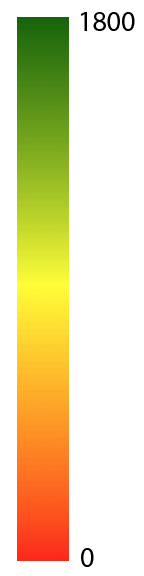
<style>
.page{position:relative;width:144px;height:576px;background:#ffffff}
.page>*{position:absolute;margin:0}
.t1{font:28px "MyriadPro-Regular";color:#000000}
</style>
<div class="page">
<p class="t1" style="left:80px;top:12px;width:55px;height:19px">1800</p>
<p class="t1" style="left:81px;top:548px;width:13px;height:19px">0</p>
</div>
